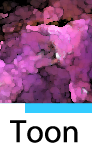
<style>
.page{position:relative;width:92px;height:150px;background:#ffffff}
.page>*{position:absolute;margin:0}
.t1{font:32.3px "MyriadPro-Regular";color:#000000}
</style>
<div class="page">
<p class="t1" style="left:10px;top:120px;width:68px;height:23px">Toon</p>
</div>
